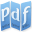
<style>
.page{position:relative;width:32px;height:32px}
.page>*{position:absolute;margin:0}
.t1{font:16px "FertigoPro-Regular";color:#e8f1f8;font-weight:bold;scale:1.07 1}
.t2{font:16px "FertigoPro-Regular";color:#e9f1f8;font-weight:bold;scale:1.07 1}
.t3{font:16px "FertigoPro-Regular";color:#e4eef7;font-weight:bold;scale:1.08 1}
.t4{font:2.6px "SovbaRegular";scale:1.07 1}
.t5{font:2.6px "SovbaRegular";scale:1.06 1}
.t6{font:2.7px "SovbaRegular";scale:1.07 1}
</style>
<div class="page">
<p class="t1" style="left:22px;top:6px;width:9px;height:19px;rotate:-21deg">f</p>
<p class="t2" style="left:1px;top:7px;width:9px;height:15px;rotate:-21deg">p</p>
<p class="t3" style="left:11px;top:8px;width:10px;height:14px;rotate:22deg">d</p>
<p class="t4" style="left:1px;top:23px;width:9px;height:5px;rotate:-20deg">Splitter</p>
<p class="t5" style="left:11px;top:23px;width:9px;height:5px;rotate:19deg">Splitter</p>
<p class="t6" style="left:22px;top:24px;width:7px;height:4px;rotate:-20deg">Splitter</p>
</div>
